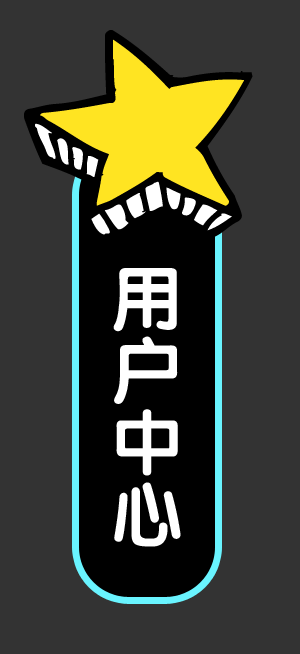
<style>
.page{position:relative;width:300px;height:654px;background:#333333}
.page>*{position:absolute;margin:0}
.t1{font:72px/72px "FZY4JW--GB1-0";color:#ffffff}
</style>
<div class="page">
<p class="t1" style="left:113px;top:268px;width:68px;height:279px">用<br>户<br>中<br>心</p>
</div>
